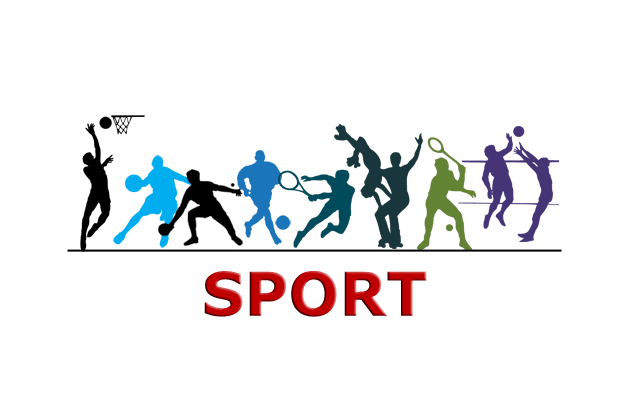
<style>
.page{position:relative;width:629px;height:404px;background:#ffffff}
.page>*{position:absolute;margin:0}
.t1{font:60px "Verdana-Bold";color:#be0000}
</style>
<div class="page">
<p class="t1" style="left:204px;top:271px;width:223px;height:46px">SPORT</p>
</div>
